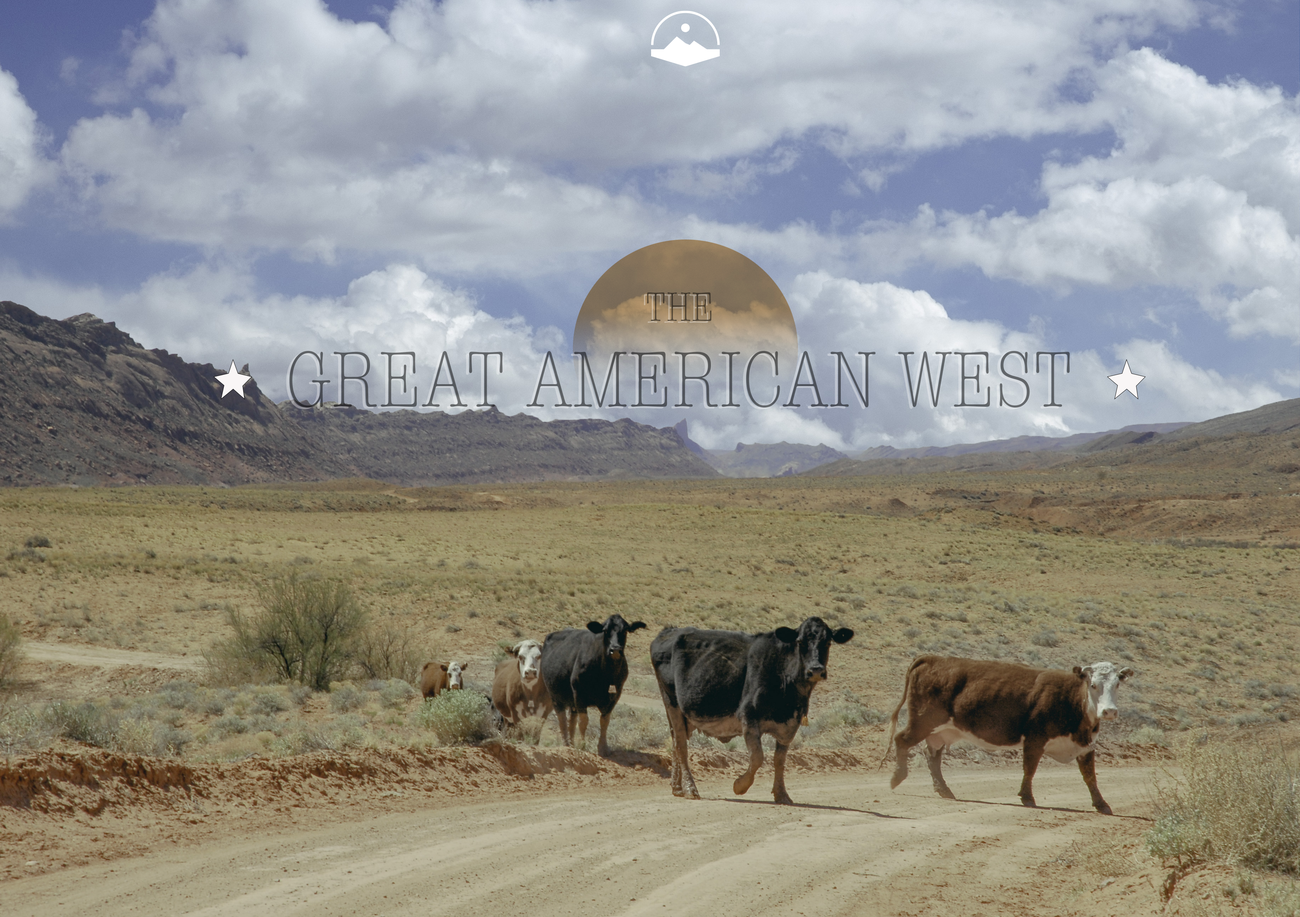
<style>
.page{position:relative;width:1300px;height:917px}
.page>*{position:absolute;margin:0}
.t1{font:42.5px "AmericanTypewriter-CondensedLight";color:#4a3e2f}
.t2{font:81.8px "AmericanTypewriter-CondensedLight";color:#585b60}
</style>
<div class="page">
<p class="t1" style="left:647px;top:292px;width:64px;height:29px">THE</p>
<p class="t2" style="left:289px;top:351px;width:781px;height:57px">GREAT AMERICAN WEST</p>
</div>
